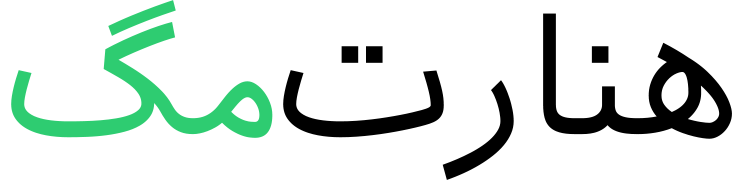
<style>
.page{position:relative;width:744px;height:184px;background:#ffffff}
.page>*{position:absolute;margin:0}
.t1{font:169px "AIranianSans";color:#2ecc71}
.t2{font:169px "AIranianSans";color:#000000}
</style>
<div class="page">
<p class="t1" style="left:11px;top:0px;width:262px;height:138px">مگ</p>
<p class="t2" style="left:283px;top:13px;width:449px;height:167px">هنارت</p>
</div>
